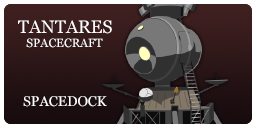
<style>
.page{position:relative;width:256px;height:128px}
.page>*{position:absolute;margin:0}
.t1{font:18px "Georgia";color:#ffffff}
.t2{font:12px "Georgia";color:#ffffff}
.t3{font:14px "Georgia";color:#ffffff}
</style>
<div class="page">
<p class="t1" style="left:18px;top:20px;width:94px;height:14px">TANTARES</p>
<p class="t2" style="left:26px;top:38px;width:77px;height:10px">SPACECRAFT</p>
<p class="t3" style="left:23px;top:96px;width:84px;height:11px">SPACEDOCK</p>
</div>
